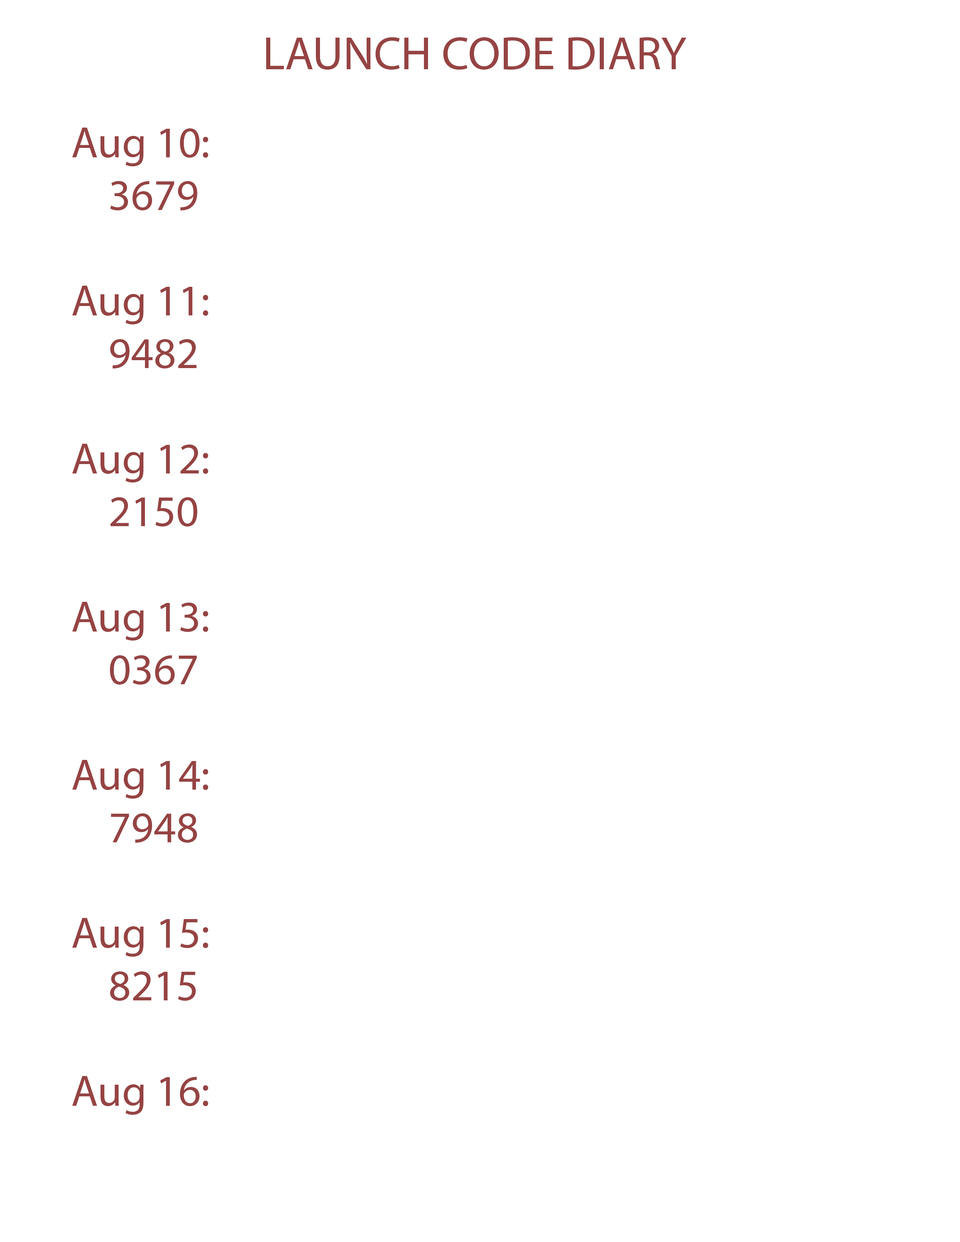
<style>
.page{position:relative;width:960px;height:1242px;background:#ffffff}
.page>*{position:absolute;margin:0}
.t1{font:47.1px "MyriadPro-Regular";color:#964343}
.t2{font:43.9px "MyriadPro-Regular";color:#964343}
</style>
<div class="page">
<p class="t1" style="left:266px;top:37px;width:421px;height:33px">LAUNCH CODE DIARY</p>
<p class="t2" style="left:72px;top:128px;width:136px;height:987px">Aug 10: <br>    3679<br><br>Aug 11: <br>    9482<br><br>Aug 12:<br>    2150 <br><br>Aug 13:<br>    0367 <br><br>Aug 14:<br>    7948 <br><br>Aug 15:<br>    8215 <br><br>Aug 16:</p>
</div>
